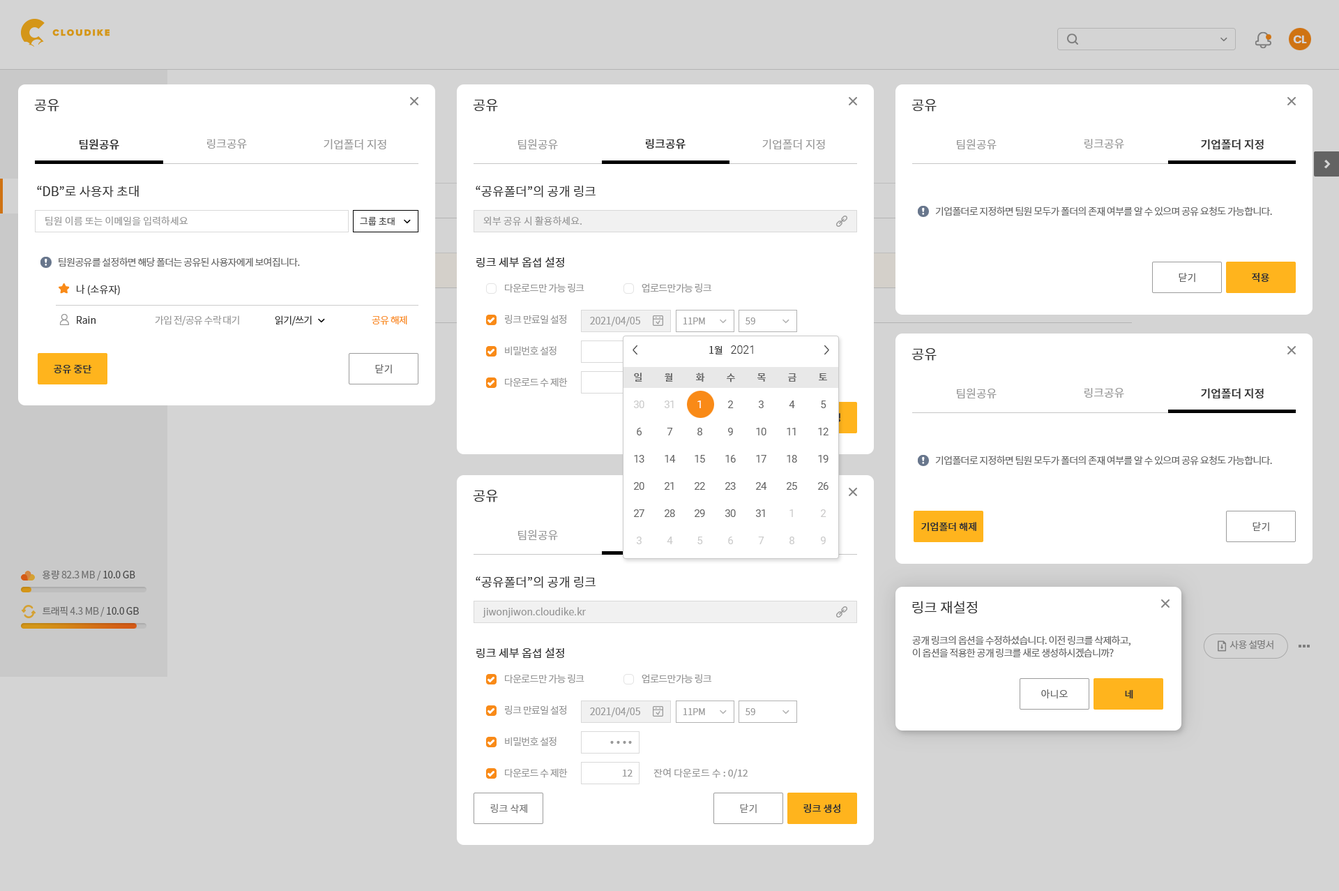
<style>
.page{position:relative;width:1339px;height:891px;background:#ffffff}
.page>*{position:absolute;margin:0}
.t1{font:13.9px "NotoSansCJKkr-DemiLight";color:#333333}
.t2{font:11.2px "NotoSansCJKkr-Medium";color:#333333}
.t3{font:11.2px "NotoSansCJKkr-DemiLight";color:#999999}
.t4{font:12.6px "NotoSansCJKkr-DemiLight";color:#333333}
.t5{font:9.8px "NotoSansCJKkr-DemiLight";letter-spacing:-0.05em;color:#666666}
.t6{font:9.8px "NotoSansCJKkr-DemiLight";color:#999999}
.t7{font:9.1px "NotoSansCJKkr-DemiLight";color:#333333}
.t8{font:11.2px "NotoSansCJKkr-Regular";color:#333333}
.t9{font:9.8px "NotoSansCJKkr-Regular";color:#666666}
.t10{font:9.8px "NotoSansCJKkr-Medium";color:#333333}
.t11{font:9.8px "NotoSansCJKkr-DemiLight";color:#333333}
.t12{font:9.8px "NotoSansCJKkr-Regular";letter-spacing:-0.05em;color:#999999}
.t13{font:9.8px "NotoSansCJKkr-DemiLight";letter-spacing:-0.05em;color:#999999}
.t14{font:9.8px "NotoSansCJKkr-DemiLight";letter-spacing:-0.05em;color:#333333}
.t15{font:9.8px "NotoSansCJKkr-DemiLight";letter-spacing:-0.05em;color:#f98a17}
.t16{font:9.1px "NotoSansCJKkr-DemiLight";color:#999999}
.t17{font:11.2px "Roboto-Light";color:#333333}
.t18{font:9.8px "NotoSansCJKkr-Medium";color:#666666}
.t19{font:10.5px/27.2px "Roboto-Regular";letter-spacing:-0.025em;color:#666666}
.t20{font:10.5px/27.2px "Roboto-Regular";letter-spacing:-0.025em;color:#cbcbcb}
.t21{font:10.5px/27.2px "Roboto-Regular";letter-spacing:-0.025em;color:#fefefe}
.t22{font:10.5px/27.2px "Roboto-Regular";letter-spacing:-0.025em;color:#cbcaca}
.t23{font:9.8px/12.6px "NotoSansCJKkr-DemiLight";letter-spacing:-0.05em;color:#666666}
.t24{font:23px "NotoSansCJKkr-DemiLight";color:#999999}
.t25{font:9.8px "NotoSansCJKkr-Regular";color:#999999}
.t26{font:9.8px "NotoSansCJKkr-Regular";color:#7b7b7b}
</style>
<div class="page">
<p class="t1" style="left:34px;top:99px;width:25px;height:13px">공유</p>
<p class="t1" style="left:473px;top:99px;width:25px;height:13px">공유</p>
<p class="t1" style="left:911px;top:99px;width:26px;height:13px">공유</p>
<p class="t2" style="left:80px;top:139px;width:39px;height:11px">팀원공유</p>
<p class="t3" style="left:207px;top:139px;width:40px;height:10px">링크공유</p>
<p class="t3" style="left:324px;top:139px;width:62px;height:11px">기업폴더 지정</p>
<p class="t3" style="left:518px;top:139px;width:40px;height:11px">팀원공유</p>
<p class="t2" style="left:646px;top:139px;width:40px;height:10px">링크공유</p>
<p class="t3" style="left:762px;top:139px;width:63px;height:11px">기업폴더 지정</p>
<p class="t3" style="left:957px;top:139px;width:40px;height:11px">팀원공유</p>
<p class="t3" style="left:1084px;top:139px;width:40px;height:10px">링크공유</p>
<p class="t2" style="left:1201px;top:139px;width:63px;height:11px">기업폴더 지정</p>
<p class="t4" style="left:37px;top:186px;width:102px;height:11px">“DB”로 사용자 초대</p>
<p class="t4" style="left:476px;top:185px;width:120px;height:12px">“공유폴더”의 공개 링크</p>
<p class="t5" style="left:935px;top:206px;width:337px;height:10px">기업폴더로 지정하면 팀원 모두가 폴더의 존재 여부를 알 수 있으며 공유 요청도 가능합니다.</p>
<p class="t6" style="left:45px;top:216px;width:143px;height:10px">팀원 이름 또는 이메일을 입력하세요</p>
<p class="t7" style="left:360px;top:217px;width:35px;height:8px">그룹 초대</p>
<p class="t6" style="left:483px;top:216px;width:99px;height:10px">외부 공유 시 활용하세요.</p>
<p class="t5" style="left:59px;top:257px;width:241px;height:10px">팀원공유를 설정하면 해당 폴더는 공유된 사용자에게 보여집니다.</p>
<p class="t8" style="left:476px;top:257px;width:88px;height:10px">링크 세부 옵셥 설정</p>
<p class="t9" style="left:1179px;top:273px;width:16px;height:9px">닫기</p>
<p class="t10" style="left:1252px;top:273px;width:17px;height:9px">적용</p>
<p class="t11" style="left:77px;top:285px;width:43px;height:10px">나 (소유자)</p>
<p class="t12" style="left:505px;top:283px;width:79px;height:10px">다운로드만 가능 링크</p>
<p class="t12" style="left:642px;top:283px;width:69px;height:10px">업로드만가능 링크</p>
<p class="t11" style="left:77px;top:316px;width:19px;height:8px">Rain</p>
<p class="t13" style="left:155px;top:315px;width:84px;height:11px">가입 전/공유 수락 대기</p>
<p class="t14" style="left:275px;top:315px;width:37px;height:11px">읽기/쓰기</p>
<p class="t15" style="left:372px;top:315px;width:35px;height:10px">공유 해제</p>
<p class="t12" style="left:505px;top:315px;width:61px;height:9px">링크 만료일 설정</p>
<p class="t6" style="left:590px;top:317px;width:50px;height:9px">2021/04/05</p>
<p class="t16" style="left:683px;top:317px;width:22px;height:7px">11PM</p>
<p class="t16" style="left:746px;top:317px;width:9px;height:7px">59</p>
<p class="t12" style="left:505px;top:346px;width:52px;height:9px">비밀번호 설정</p>
<p class="t11" style="left:709px;top:345px;width:13px;height:9px">1월</p>
<p class="t17" style="left:731px;top:345px;width:22px;height:9px">2021</p>
<p class="t1" style="left:911px;top:348px;width:26px;height:13px">공유</p>
<p class="t10" style="left:54px;top:365px;width:38px;height:9px">공유 중단</p>
<p class="t9" style="left:375px;top:364px;width:17px;height:10px">닫기</p>
<p class="t12" style="left:505px;top:377px;width:63px;height:10px">다운로드 수 제한</p>
<p class="t18" style="left:634px;top:372px;width:8px;height:9px">일</p>
<p class="t18" style="left:665px;top:372px;width:8px;height:9px">월</p>
<p class="t18" style="left:696px;top:372px;width:9px;height:10px">화</p>
<p class="t18" style="left:727px;top:373px;width:8px;height:9px">수</p>
<p class="t18" style="left:757px;top:373px;width:9px;height:8px">목</p>
<p class="t18" style="left:788px;top:373px;width:8px;height:8px">금</p>
<p class="t18" style="left:819px;top:373px;width:8px;height:8px">토</p>
<p class="t3" style="left:957px;top:388px;width:40px;height:11px">팀원공유</p>
<p class="t3" style="left:1084px;top:388px;width:40px;height:10px">링크공유</p>
<p class="t2" style="left:1201px;top:388px;width:63px;height:11px">기업폴더 지정</p>
<p class="t19" style="left:634px;top:400px;width:10px;height:144px;text-align:center"><span class="t20">30<br></span>6<br>13<br>20<br>27<br><span class="t20">3</span></p>
<p class="t19" style="left:665px;top:400px;width:11px;height:144px;text-align:center"><span class="t20">31<br></span>7<br>14<br>21<br>28<br><span class="t20">4</span></p>
<p class="t19" style="left:695px;top:400px;width:10px;height:144px;text-align:center"><span class="t21">1<br></span>8<br>15<br>22<br>29<br><span class="t20">5</span></p>
<p class="t19" style="left:725px;top:400px;width:11px;height:144px;text-align:center">2<br>9<br>16<br>23<br>30<br><span class="t20">6</span></p>
<p class="t19" style="left:756px;top:400px;width:11px;height:144px;text-align:center">3<br>10<br>17<br>24<br>31<br><span class="t20">7</span></p>
<p class="t19" style="left:787px;top:400px;width:10px;height:144px;text-align:center">4<br>11<br>18<br>25<br><span class="t20">1<br>8</span></p>
<p class="t19" style="left:818px;top:400px;width:10px;height:144px;text-align:center">5<br>12<br>19<br>26<br><span class="t22">2<br>9</span></p>
<p class="t5" style="left:935px;top:455px;width:337px;height:10px">기업폴더로 지정하면 팀원 모두가 폴더의 존재 여부를 알 수 있으며 공유 요청도 가능합니다.</p>
<p class="t1" style="left:473px;top:490px;width:25px;height:12px">공유</p>
<p class="t10" style="left:921px;top:522px;width:55px;height:9px">기업폴더 해제</p>
<p class="t9" style="left:1252px;top:522px;width:17px;height:9px">닫기</p>
<p class="t3" style="left:518px;top:529px;width:40px;height:11px">팀원공유</p>
<p class="t4" style="left:476px;top:575px;width:120px;height:13px">“공유폴더”의 공개 링크</p>
<p class="t1" style="left:912px;top:600px;width:65px;height:14px">링크 재설정</p>
<p class="t6" style="left:483px;top:607px;width:103px;height:10px">jiwonjiwon.cloudike.kr</p>
<p class="t23" style="left:912px;top:635px;width:218px;height:23px">공개 링크의 옵션을 수정하셨습니다. 이전 링크를 삭제하고, <br>이 옵션을 적용한 공개 링크를 새로 생성하시겠습니까?</p>
<p class="t8" style="left:476px;top:647px;width:88px;height:11px">링크 세부 옵셥 설정</p>
<p class="t12" style="left:505px;top:674px;width:79px;height:9px">다운로드만 가능 링크</p>
<p class="t12" style="left:642px;top:674px;width:69px;height:9px">업로드만가능 링크</p>
<p class="t9" style="left:1041px;top:689px;width:27px;height:10px">아니오</p>
<p class="t10" style="left:1125px;top:689px;width:8px;height:10px">네</p>
<p class="t12" style="left:505px;top:705px;width:61px;height:9px">링크 만료일 설정</p>
<p class="t6" style="left:590px;top:707px;width:50px;height:10px">2021/04/05</p>
<p class="t16" style="left:683px;top:708px;width:22px;height:7px">11PM</p>
<p class="t16" style="left:746px;top:708px;width:9px;height:7px">59</p>
<p class="t12" style="left:505px;top:736px;width:52px;height:10px">비밀번호 설정</p>
<p class="t24" style="left:610px;top:740px;width:22px;height:3px">....</p>
<p class="t12" style="left:505px;top:768px;width:63px;height:10px">다운로드 수 제한</p>
<p class="t6" style="left:622px;top:769px;width:11px;height:7px">12</p>
<p class="t25" style="left:653px;top:768px;width:95px;height:10px">잔여 다운로드 수 : 0/12</p>
<p class="t26" style="left:490px;top:803px;width:37px;height:10px">링크 삭제</p>
<p class="t26" style="left:740px;top:803px;width:17px;height:10px">닫기</p>
<p class="t10" style="left:803px;top:803px;width:37px;height:9px">링크　생성</p>
</div>
